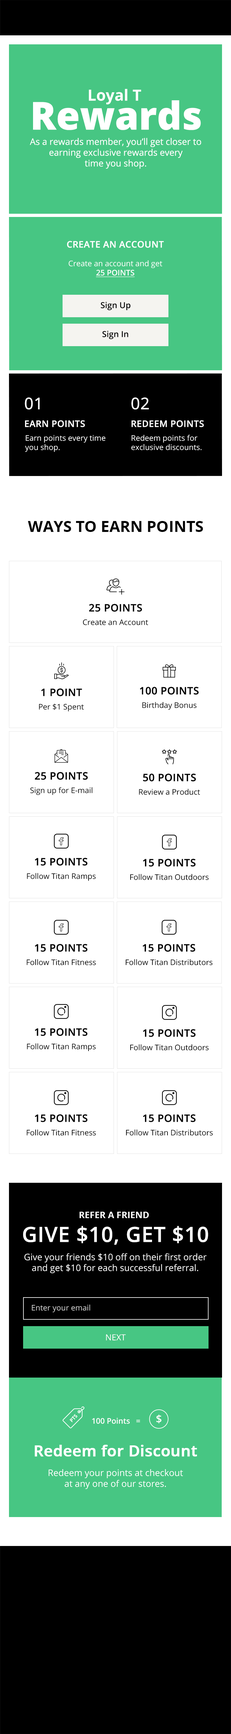
<style>
.page{position:relative;width:231px;height:1734px;background:#ffffff}
.page>*{position:absolute;margin:0}
.t1{font:15.4px "OpenSans-Bold";color:#ffffff}
.t2{font:38.6px "OpenSans-Extrabold";color:#ffffff}
.t3{font:9px "OpenSans-Regular";color:#ffffff}
.t4{font:9px "OpenSans-Semibold";color:#ffffff;text-transform:uppercase;font-weight:bold}
.t5{font:7.7px "OpenSans-Regular";color:#ffffff}
.t6{font:7.7px "OpenSans-Semibold";color:#ffffff;text-transform:uppercase;text-decoration:underline}
.t7{font:8.4px "OpenSans-Semibold";color:#000000}
.t8{font:16.1px "OpenSans-Regular";color:#ffffff;font-weight:bold}
.t9{font:9px "OpenSans-Semibold";color:#ffffff;font-weight:bold}
.t10{font:15.4px "OpenSans-Bold";color:#000000;text-transform:uppercase}
.t11{font:10.3px "OpenSans-Semibold";color:#000000;text-transform:uppercase;font-weight:bold}
.t12{font:7.7px "OpenSans-Regular";color:#000000}
.t13{font:9px "OpenSans-Bold";color:#ffffff;text-transform:uppercase}
.t14{font:20.9px "OpenSans-Semibold";color:#ffffff;text-transform:uppercase;font-weight:bold}
.t15{font:7.7px "OpenSans-Regular";letter-spacing:0.002em;color:#cbcbcb}
.t16{font:8.4px "OpenSans-Regular";letter-spacing:0.002em;color:#ffffff}
.t17{font:4.9px "OpenSans-Bold";color:#ffffff}
.t18{font:7.7px "OpenSans-Semibold";color:#ffffff}
.t19{font:10.7px "OpenSans-Semibold";color:#ffffff}
.t20{font:15.4px "OpenSans-Semibold";color:#ffffff;font-weight:bold}
</style>
<div class="page">
<p class="t1" style="left:89px;top:89px;width:52px;height:15px">Loyal T</p>
<p class="t2" style="left:33px;top:100px;width:168px;height:30px">Rewards</p>
<p class="t3" style="left:30px;top:138px;width:172px;height:31px;text-align:center">As a rewards member, you’ll get closer to<br>earning exclusive rewards every<br>time you shop.</p>
<p class="t4" style="left:67px;top:241px;width:97px;height:7px">Create an Account</p>
<p class="t5" style="left:69px;top:260px;width:94px;height:17px;text-align:center">Create an account and get<br><span class="t6">25 points</span></p>
<p class="t7" style="left:101px;top:302px;width:30px;height:8px">Sign Up</p>
<p class="t7" style="left:103px;top:331px;width:26px;height:8px">Sign In</p>
<p class="t8" style="left:25px;top:397px;width:15px;height:13px">01</p>
<p class="t8" style="left:131px;top:397px;width:18px;height:13px">02</p>
<p class="t9" style="left:25px;top:420px;width:60px;height:7px">EARN POINTS</p>
<p class="t9" style="left:132px;top:420px;width:72px;height:7px">REDEEM POINTS</p>
<p class="t5" style="left:25px;top:435px;width:81px;height:17px">Earn points every time<br>you shop.</p>
<p class="t5" style="left:131px;top:435px;width:71px;height:15px">Redeem points for <br>exclusive discounts.</p>
<p class="t10" style="left:28px;top:521px;width:175px;height:11px">Ways To Earn Points</p>
<p class="t11" style="left:89px;top:604px;width:53px;height:8px">25 Points</p>
<p class="t12" style="left:83px;top:619px;width:65px;height:6px">Create an Account</p>
<p class="t11" style="left:41px;top:688px;width:41px;height:8px">1 Point</p>
<p class="t11" style="left:140px;top:687px;width:59px;height:8px">100 Points</p>
<p class="t12" style="left:142px;top:702px;width:55px;height:8px">Birthday Bonus</p>
<p class="t12" style="left:39px;top:704px;width:45px;height:8px">Per $1 Spent</p>
<p class="t11" style="left:35px;top:772px;width:53px;height:8px">25 Points</p>
<p class="t11" style="left:143px;top:774px;width:53px;height:7px">50 Points</p>
<p class="t12" style="left:30px;top:787px;width:63px;height:8px">Sign up for E-mail</p>
<p class="t12" style="left:139px;top:789px;width:62px;height:6px">Review a Product</p>
<p class="t11" style="left:35px;top:858px;width:53px;height:8px">15 Points</p>
<p class="t11" style="left:143px;top:859px;width:53px;height:8px">15 Points</p>
<p class="t12" style="left:27px;top:873px;width:69px;height:8px">Follow Titan Ramps</p>
<p class="t12" style="left:130px;top:874px;width:79px;height:6px">Follow Titan Outdoors</p>
<p class="t11" style="left:35px;top:944px;width:53px;height:8px">15 Points</p>
<p class="t11" style="left:143px;top:944px;width:53px;height:8px">15 Points</p>
<p class="t12" style="left:27px;top:959px;width:69px;height:6px">Follow Titan Fitness</p>
<p class="t12" style="left:126px;top:959px;width:87px;height:6px">Follow Titan Distributors</p>
<p class="t11" style="left:35px;top:1028px;width:53px;height:8px">15 Points</p>
<p class="t11" style="left:143px;top:1029px;width:53px;height:8px">15 Points</p>
<p class="t12" style="left:27px;top:1043px;width:69px;height:8px">Follow Titan Ramps</p>
<p class="t12" style="left:130px;top:1044px;width:79px;height:6px">Follow Titan Outdoors</p>
<p class="t11" style="left:35px;top:1114px;width:53px;height:8px">15 Points</p>
<p class="t11" style="left:143px;top:1114px;width:53px;height:8px">15 Points</p>
<p class="t12" style="left:27px;top:1130px;width:69px;height:6px">Follow Titan Fitness</p>
<p class="t12" style="left:126px;top:1130px;width:87px;height:6px">Follow Titan Distributors</p>
<p class="t13" style="left:80px;top:1212px;width:69px;height:6px">REFER A FRIEND</p>
<p class="t14" style="left:23px;top:1226px;width:186px;height:19px">Give $10, Get $10</p>
<p class="t3" style="left:24px;top:1253px;width:183px;height:21px;text-align:center">Give your friends $10 off on their first order<br>and get $10 for each successful referral.</p>
<p class="t15" style="left:32px;top:1305px;width:58px;height:7px">Enter your email</p>
<p class="t16" style="left:106px;top:1334px;width:20px;height:7px">NEXT</p>
<p class="t17" style="left:70px;top:1414px;width:7px;height:8px;rotate:-47deg">PTS</p>
<p class="t18" style="left:92px;top:1418px;width:48px;height:6px">100 Points   =</p>
<p class="t19" style="left:157px;top:1415px;width:5px;height:9px">$</p>
<p class="t20" style="left:35px;top:1445px;width:162px;height:12px">Redeem for Discount</p>
<p class="t3" style="left:49px;top:1469px;width:134px;height:20px;text-align:center">Redeem your points at checkout<br>at any one of our stores.</p>
</div>
